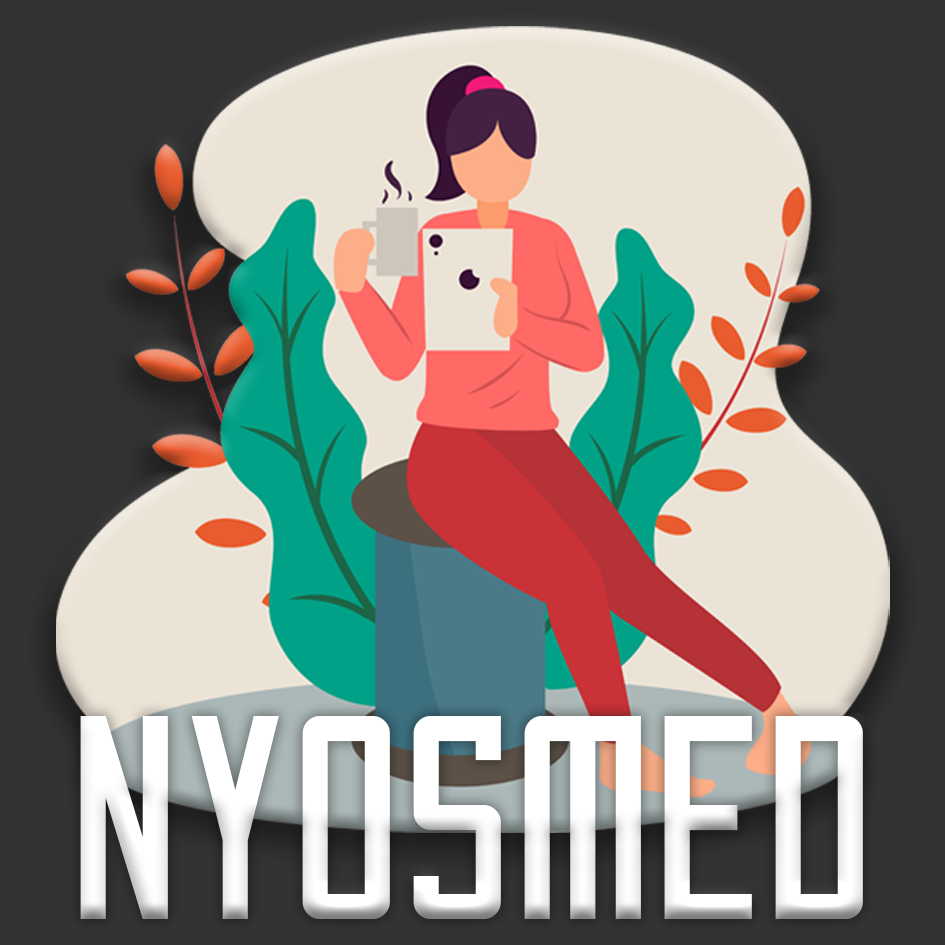
<style>
.page{position:relative;width:945px;height:945px;background:#333333}
.page>*{position:absolute;margin:0}
.t1{font:254.3px "SAOUITT-Regular";letter-spacing:0.025em;color:#ffffff}
</style>
<div class="page">
<p class="t1" style="left:80px;top:716px;width:783px;height:203px">NYOSMED</p>
</div>
